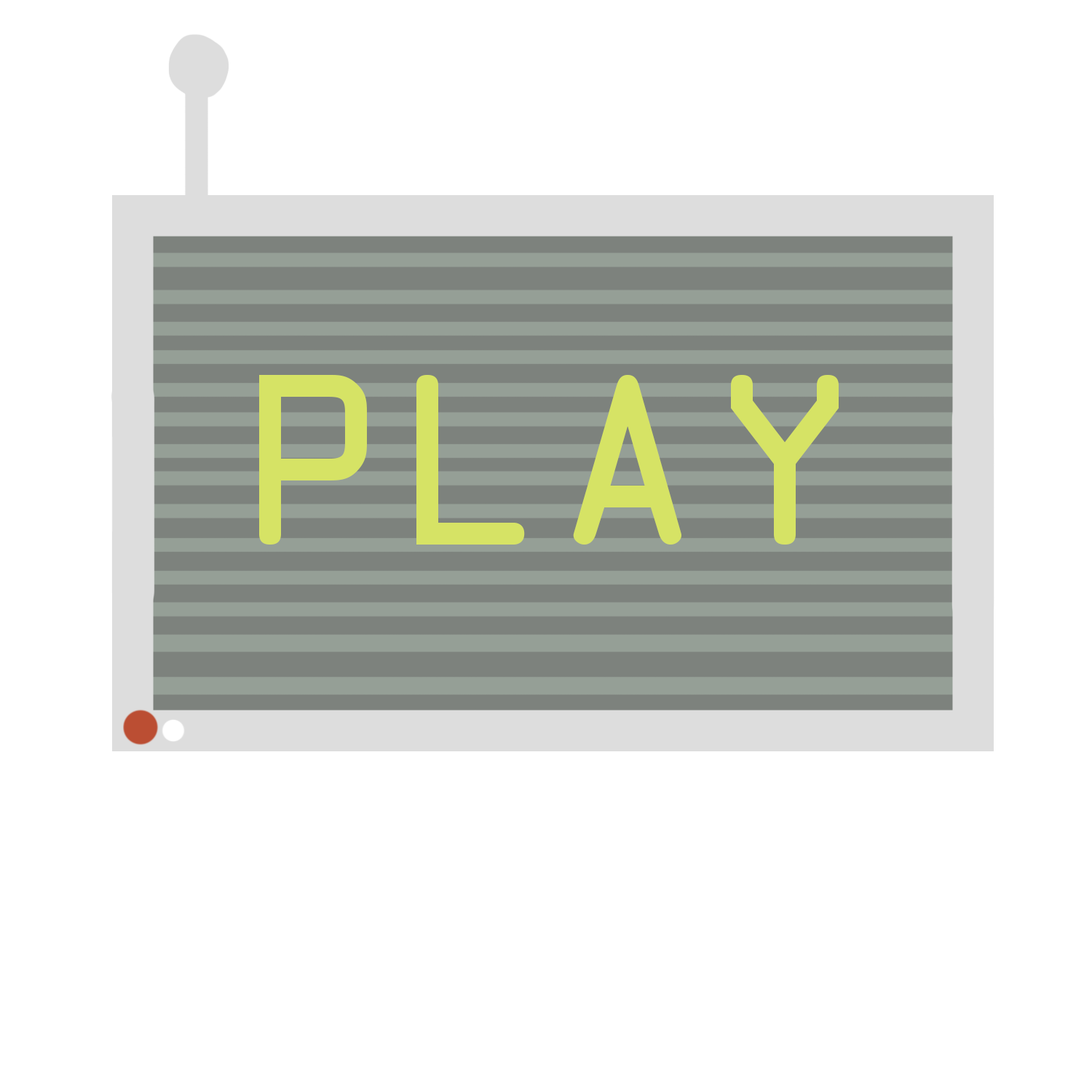
<style>
.page{position:relative;width:1092px;height:1092px;background:#ffffff}
.page>*{position:absolute;margin:0}
.t1{font:218.4px "OCRAStd";color:#d6e365}
</style>
<div class="page">
<p class="t1" style="left:259px;top:375px;width:580px;height:170px">PLAY</p>
</div>
